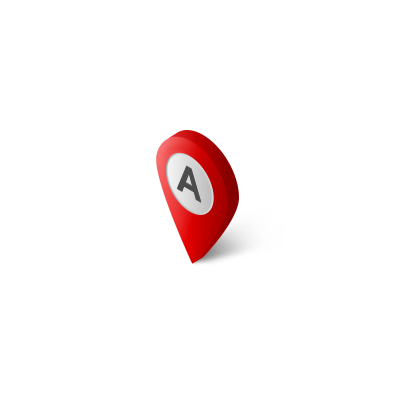
<style>
.page{position:relative;width:400px;height:400px;background:#ffffff}
.page>*{position:absolute;margin:0}
.t1{font:39px "Arial-BoldMT";color:#4c4c4c}
</style>
<div class="page">
<p class="t1" style="left:177px;top:166px;width:25px;height:37px;rotate:30deg">A</p>
</div>
